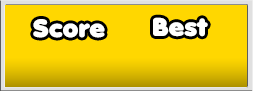
<style>
.page{position:relative;width:253px;height:91px;background:#ffd700}
.page>*{position:absolute;margin:0}
.t1{font:25.3px "Debussy";color:#ffffff}
</style>
<div class="page">
<p class="t1" style="left:153px;top:17px;width:55px;height:20px">Best</p>
<p class="t1" style="left:33px;top:19px;width:72px;height:19px">Score</p>
</div>
